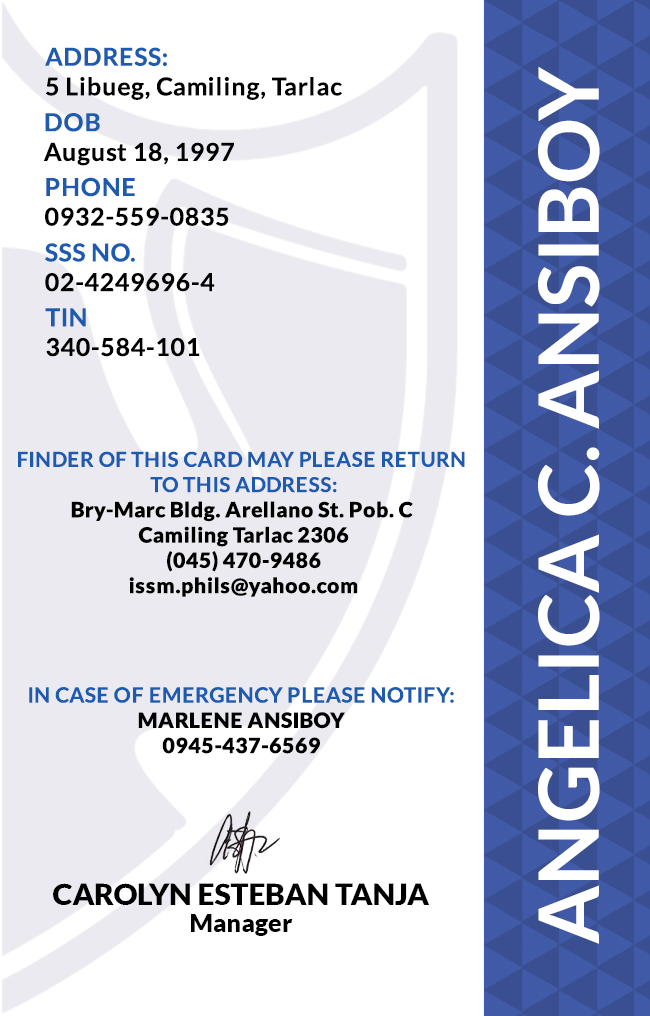
<style>
.page{position:relative;width:650px;height:1016px;background:#ffffff}
.page>*{position:absolute;margin:0}
.t1{font:24.7px/29.6px "Lato-Bold";letter-spacing:0.025em}
.t2{font:83.3px "Lato-Bold";color:#ffffff}
.t3{font:24.7px/29.6px "Lato-Bold";letter-spacing:0.025em;color:#000000}
.t4{font:21.1px "Lato-Black";letter-spacing:0.025em}
.t5{font:20.5px/25.3px "Lato-Bold";letter-spacing:0.025em;text-transform:uppercase}
.t6{font:21.1px/25.3px "Lato-Bold";letter-spacing:0.025em}
.t7{font:29.5px "Lato-Black";color:#000000}
.t8{font:25px "Lato-Black";color:#000000}
</style>
<div class="page">
<p class="t1" style="left:45px;top:47px;width:297px;height:53px">ADDRESS:<br>5 Libueg, Camiling, Tarlac</p>
<p class="t2" style="left:538px;top:66px;width:62px;height:878px;rotate:-90deg">ANGELICA C. ANSIBOY</p>
<p class="t3" style="left:43px;top:113px;width:191px;height:53px">DOB<br>August 18, 1997</p>
<p class="t1" style="left:45px;top:177px;width:184px;height:49px">PHONE <br>0932-559-0835</p>
<p class="t1" style="left:45px;top:243px;width:170px;height:49px">SSS NO.<br>02-4249696-4</p>
<p class="t3" style="left:45px;top:308px;width:155px;height:49px">TIN<br>340-584-101</p>
<p class="t4" style="left:18px;top:451px;width:447px;height:146px;text-align:center"><span class="t5">Finder of this card may please return <br>to this address:<br></span>Bry-Marc Bldg. Arellano St. Pob. C <br>Camiling Tarlac 2306<br>(045) 470-9486<br>issm.phils@yahoo.com</p>
<p class="t6" style="left:29px;top:687px;width:425px;height:67px;text-align:center">IN CASE OF EMERGENCY PLEASE NOTIFY:<br><span class="t4">MARLENE ANSIBOY<br>0945-437-6569</span></p>
<p class="t7" style="left:53px;top:883px;width:376px;height:22px">CAROLYN ESTEBAN TANJA</p>
<p class="t8" style="left:191px;top:914px;width:102px;height:22px">Manager</p>
</div>
